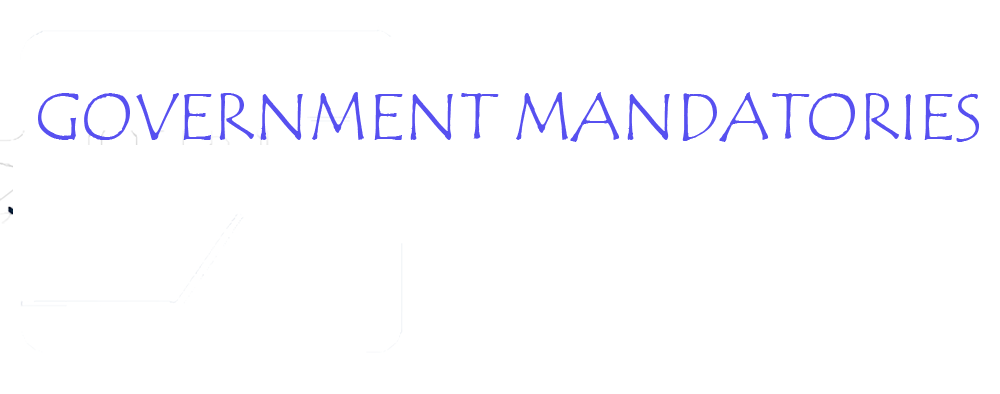
<style>
.page{position:relative;width:1000px;height:394px;background:#ffffff}
.page>*{position:absolute;margin:0}
.t1{font:66.7px "TempusSansITC";color:#5750f0}
</style>
<div class="page">
<p class="t1" style="left:38px;top:92px;width:941px;height:50px">GOVERNMENT MANDATORIES</p>
</div>
